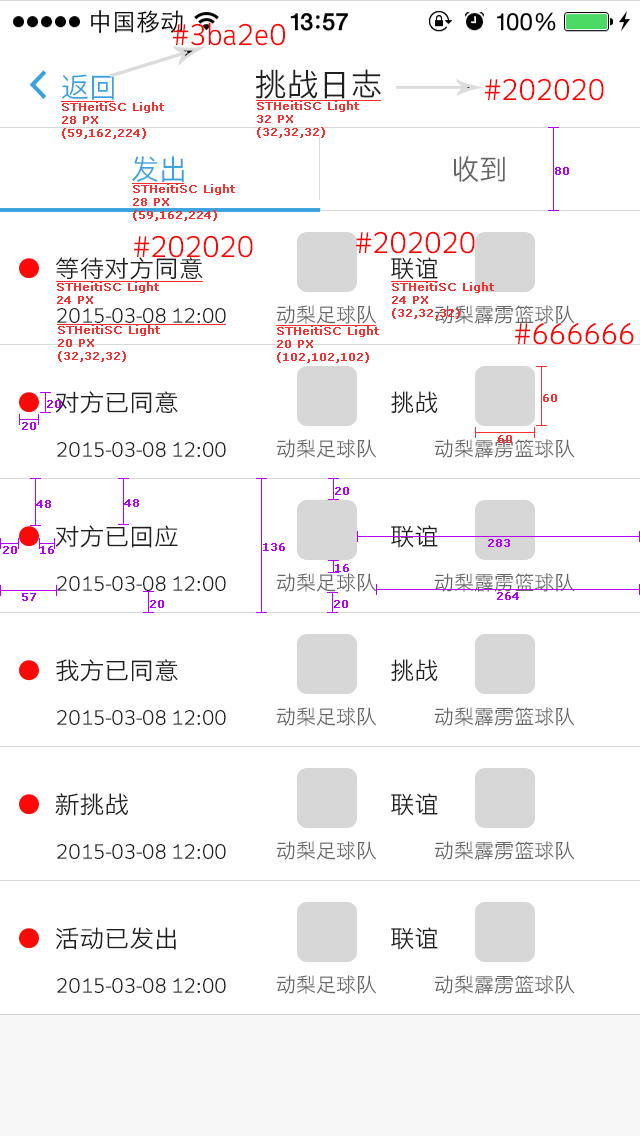
<style>
.page{position:relative;width:640px;height:1136px;background:#ffffff}
.page>*{position:absolute;margin:0}
.t1{font:28px "STHeitiSC-Light";color:#fb0404}
.t2{font:28px "STHeitiSC-Light";color:#3ba2e0}
.t3{font:32px "STHeitiSC-Light";color:#202020}
.t4{font:11px "Verdana";color:#f83030;font-weight:bold}
.t5{font:28.3px "STHeitiSC-Light";color:#3ba2e0}
.t6{font:28.3px "STHeitiSC-Light";color:#666666}
.t7{font:11px "Verdana";color:#b400ff;font-weight:bold}
.t8{font:24px "STHeitiSC-Light";color:#202020;scale:1.03 1}
.t9{font:24px "STHeitiSC-Light";color:#202020}
.t10{font:20px "STHeitiSC-Light";color:#666666}
.t11{font:19.5px "STHeitiSC-Light";color:#202020;scale:1.03 1}
</style>
<div class="page">
<p class="t1" style="left:173px;top:22px;width:112px;height:24px">#3ba2e0</p>
<p class="t2" style="left:61px;top:74px;width:53px;height:26px">返回</p>
<p class="t3" style="left:256px;top:69px;width:125px;height:30px">挑战日志</p>
<p class="t1" style="left:485px;top:78px;width:119px;height:23px">#202020</p>
<p class="t4" style="left:62px;top:102px;width:102px;height:37px">STHeitiSC Light<br>28 PX<br>(59,162,224)</p>
<p class="t4" style="left:257px;top:101px;width:102px;height:37px">STHeitiSC Light<br>32 PX<br>(32,32,32)</p>
<p class="t5" style="left:132px;top:156px;width:52px;height:26px">发出</p>
<p class="t6" style="left:454px;top:156px;width:51px;height:26px">收到</p>
<p class="t7" style="left:555px;top:167px;width:14px;height:8px">80</p>
<p class="t4" style="left:133px;top:184px;width:102px;height:37px">STHeitiSC Light<br>28 PX<br>(59,162,224)</p>
<p class="t1" style="left:356px;top:231px;width:119px;height:23px">#202020</p>
<p class="t1" style="left:134px;top:235px;width:119px;height:23px">#202020</p>
<p class="t8" style="left:56px;top:257px;width:147px;height:23px">等待对方同意</p>
<p class="t9" style="left:391px;top:257px;width:47px;height:23px">联谊</p>
<p class="t4" style="left:57px;top:282px;width:102px;height:22px">STHeitiSC Light<br>24 PX</p>
<p class="t4" style="left:392px;top:282px;width:102px;height:37px">STHeitiSC Light<br>24 PX<br>(32,32,32)</p>
<p class="t10" style="left:276px;top:305px;width:100px;height:19px">动梨足球队</p>
<p class="t10" style="left:434px;top:305px;width:141px;height:19px">动梨霹雳篮球队</p>
<p class="t11" style="left:57px;top:308px;width:169px;height:15px">2015-03-08 12:00</p>
<p class="t4" style="left:58px;top:325px;width:102px;height:37px">STHeitiSC Light<br>20 PX<br>(32,32,32)</p>
<p class="t4" style="left:277px;top:326px;width:102px;height:37px">STHeitiSC Light<br>20 PX<br>(102,102,102)</p>
<p class="t1" style="left:515px;top:323px;width:119px;height:22px">#666666</p>
<p class="t7" style="left:47px;top:400px;width:14px;height:8px">20</p>
<p class="t8" style="left:55px;top:391px;width:123px;height:23px">对方已同意</p>
<p class="t9" style="left:391px;top:391px;width:47px;height:23px">挑战</p>
<p class="t4" style="left:543px;top:394px;width:14px;height:8px">60</p>
<p class="t7" style="left:22px;top:422px;width:14px;height:8px">20</p>
<p class="t4" style="left:498px;top:435px;width:14px;height:8px">60</p>
<p class="t11" style="left:57px;top:442px;width:169px;height:15px">2015-03-08 12:00</p>
<p class="t10" style="left:276px;top:439px;width:100px;height:19px">动梨足球队</p>
<p class="t10" style="left:434px;top:439px;width:141px;height:19px">动梨霹雳篮球队</p>
<p class="t7" style="left:335px;top:487px;width:14px;height:8px">20</p>
<p class="t7" style="left:36px;top:500px;width:15px;height:8px">48</p>
<p class="t7" style="left:124px;top:499px;width:15px;height:8px">48</p>
<p class="t8" style="left:55px;top:525px;width:123px;height:23px">对方已回应</p>
<p class="t9" style="left:391px;top:525px;width:47px;height:23px">联谊</p>
<p class="t7" style="left:263px;top:543px;width:22px;height:8px">136</p>
<p class="t7" style="left:488px;top:539px;width:22px;height:8px">283</p>
<p class="t7" style="left:3px;top:546px;width:14px;height:8px">20</p>
<p class="t7" style="left:40px;top:546px;width:14px;height:8px">16</p>
<p class="t7" style="left:335px;top:564px;width:14px;height:8px">16</p>
<p class="t11" style="left:57px;top:576px;width:169px;height:15px">2015-03-08 12:00</p>
<p class="t10" style="left:276px;top:573px;width:100px;height:19px">动梨足球队</p>
<p class="t10" style="left:434px;top:573px;width:141px;height:19px">动梨霹雳篮球队</p>
<p class="t7" style="left:22px;top:593px;width:14px;height:8px">57</p>
<p class="t7" style="left:497px;top:592px;width:22px;height:8px">264</p>
<p class="t7" style="left:150px;top:600px;width:14px;height:8px">20</p>
<p class="t7" style="left:334px;top:600px;width:14px;height:8px">20</p>
<p class="t8" style="left:56px;top:659px;width:122px;height:23px">我方已同意</p>
<p class="t9" style="left:391px;top:659px;width:47px;height:23px">挑战</p>
<p class="t11" style="left:57px;top:710px;width:169px;height:15px">2015-03-08 12:00</p>
<p class="t10" style="left:276px;top:707px;width:100px;height:19px">动梨足球队</p>
<p class="t10" style="left:434px;top:707px;width:141px;height:19px">动梨霹雳篮球队</p>
<p class="t8" style="left:55px;top:793px;width:74px;height:23px">新挑战</p>
<p class="t9" style="left:391px;top:793px;width:47px;height:23px">联谊</p>
<p class="t11" style="left:57px;top:844px;width:169px;height:15px">2015-03-08 12:00</p>
<p class="t10" style="left:276px;top:841px;width:100px;height:19px">动梨足球队</p>
<p class="t10" style="left:434px;top:841px;width:141px;height:19px">动梨霹雳篮球队</p>
<p class="t8" style="left:56px;top:927px;width:120px;height:23px">活动已发出</p>
<p class="t9" style="left:391px;top:927px;width:47px;height:23px">联谊</p>
<p class="t10" style="left:276px;top:975px;width:100px;height:19px">动梨足球队</p>
<p class="t10" style="left:434px;top:975px;width:141px;height:19px">动梨霹雳篮球队</p>
<p class="t11" style="left:57px;top:978px;width:169px;height:15px">2015-03-08 12:00</p>
</div>
